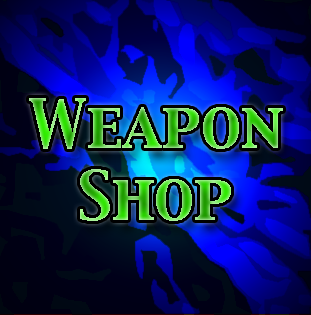
<style>
.page{position:relative;width:311px;height:315px}
.page>*{position:absolute;margin:0}
.t1{font:60px "CapitalsRegular"}
</style>
<div class="page">
<p class="t1" style="left:29px;top:98px;width:254px;height:123px;text-align:center">Weapon<br>Shop</p>
</div>
